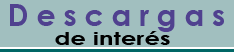
<style>
.page{position:relative;width:234px;height:52px;background:#a1bfbf}
.page>*{position:absolute;margin:0}
.t1{font:30.5px "CenturyGothic-Bold";letter-spacing:0.25em;color:#50418f}
.t2{font:18px "CenturyGothic-Bold";color:#000000;scale:1.36 1}
</style>
<div class="page">
<p class="t1" style="left:10px;top:4px;width:214px;height:28px">Descargas</p>
<p class="t2" style="left:55px;top:31px;width:115px;height:14px">de interés</p>
</div>
